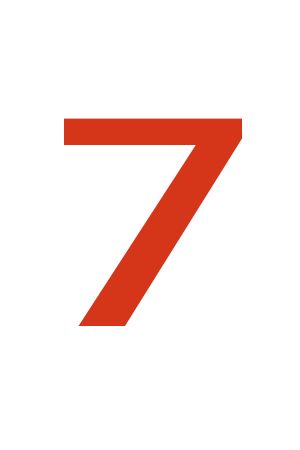
<style>
.page{position:relative;width:300px;height:450px;background:#ffffff}
.page>*{position:absolute;margin:0}
.t1{font:275.2px "AdobeFanHeitiStd-Bold";color:#d53518;scale:1.42 1}
</style>
<div class="page">
<p class="t1" style="left:64px;top:118px;width:178px;height:208px">7</p>
</div>
